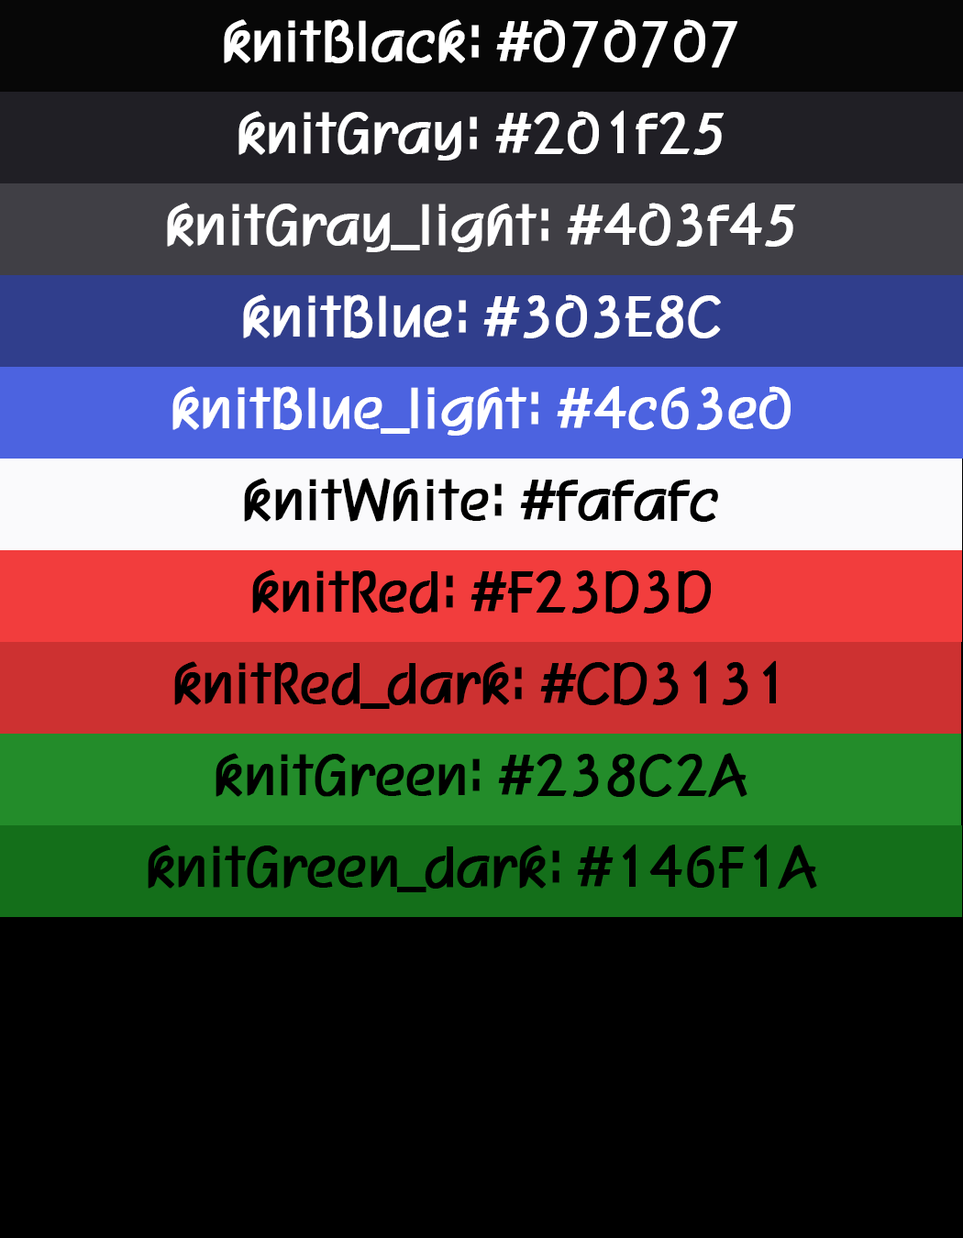
<style>
.page{position:relative;width:963px;height:1238px;background:#000000}
.page>*{position:absolute;margin:0}
.t1{font:55px "H2porM";letter-spacing:-0.1em;color:#ffffff;font-weight:bold}
.t2{font:55px "H2porM";letter-spacing:-0.1em;color:#000000;font-weight:bold}
</style>
<div class="page">
<p class="t1" style="left:224px;top:19px;width:513px;height:49px">knitBlack: #070707</p>
<p class="t1" style="left:238px;top:110px;width:486px;height:51px">knitGray: #201f25</p>
<p class="t1" style="left:167px;top:203px;width:628px;height:49px">knitGray_light: #403f45</p>
<p class="t1" style="left:243px;top:294px;width:478px;height:44px">knitBlue: #303E8C</p>
<p class="t1" style="left:172px;top:386px;width:619px;height:50px">knitBlue_light: #4c63e0</p>
<p class="t2" style="left:244px;top:478px;width:474px;height:44px">knitWhite: #fafafc</p>
<p class="t2" style="left:252px;top:570px;width:459px;height:44px">knitRed: #F23D3D</p>
<p class="t2" style="left:174px;top:660px;width:602px;height:49px">knitRed_dark: #CD3131</p>
<p class="t2" style="left:216px;top:753px;width:532px;height:45px">knitGreen: #238C2A</p>
<p class="t2" style="left:148px;top:844px;width:669px;height:48px">knitGreen_dark: #146F1A</p>
</div>
